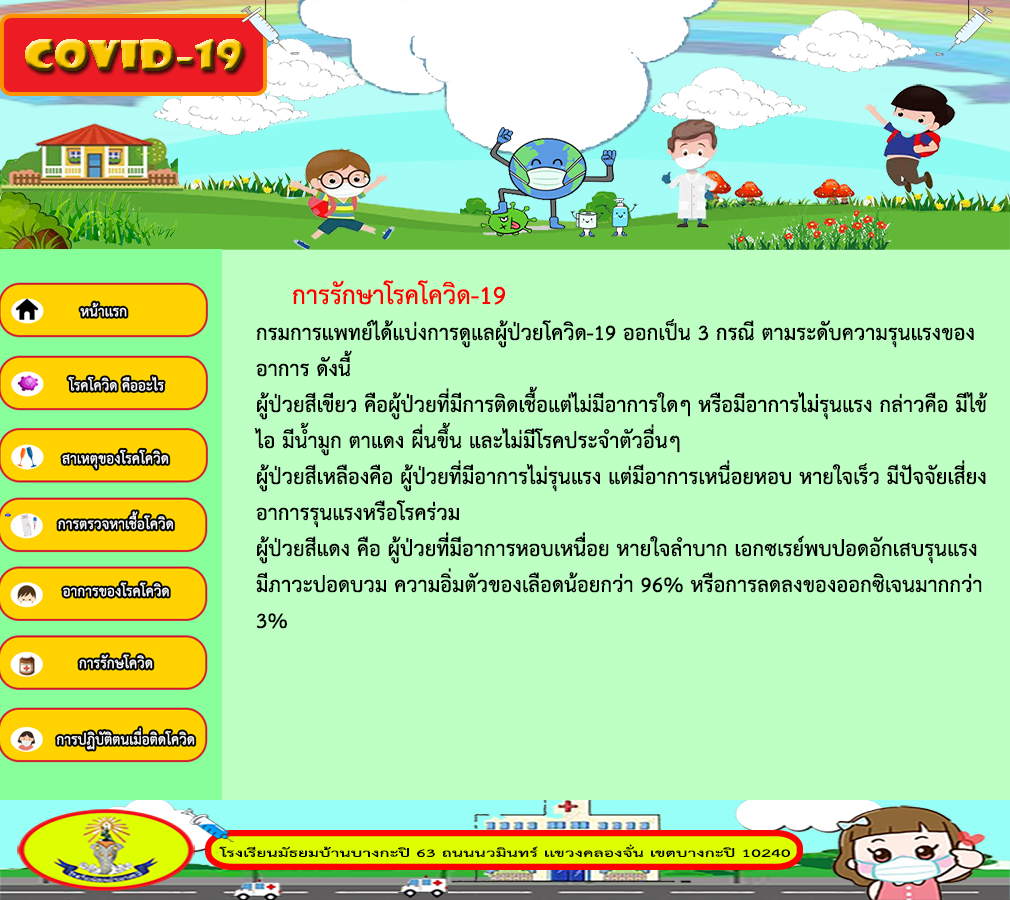
<style>
.page{position:relative;width:1010px;height:900px;background:#beffc3}
.page>*{position:absolute;margin:0}
.t1{font:30px "THSarabunPSK-Bold";color:#000000}
.t2{font:36px "THSarabunPSK-Bold";color:#000000}
.t3{font:36px "THSarabunPSK-Bold";color:#ff0000}
</style>
<div class="page">
<p class="t1" style="left:254px;top:280px;width:734px;height:349px"><span class="t2"> </span><span class="t3">การรักษาโรคโควิด-19<br></span>กรมการแพทย์ได้แบ่งการดูแลผู้ป่วยโควิด-19 ออกเป็น 3 กรณี ตามระดับความรุนแรงของ<br>อาการ ดังนี้<br>ผู้ป่วยสีเขียว คือผู้ป่วยที่มีการติดเชื้อแต่ไม่มีอาการใดๆ หรือมีอาการไม่รุนแรง กล่าวคือ มีไข้<br>ไอ มีน้ำมูก ตาแดง ผื่นขึ้น และไม่มีโรคประจำตัวอื่นๆ <br>ผู้ป่วยสีเหลืองคือ ผู้ป่วยที่มีอาการไม่รุนแรง แต่มีอาการเหนื่อยหอบ หายใจเร็ว มีปัจจัยเสี่ยง<br>อาการรุนแรงหรือโรคร่วม<br>ผู้ป่วยสีแดง คือ ผู้ป่วยที่มีอาการหอบเหนื่อย หายใจลำบาก เอกซเรย์พบปอดอักเสบรุนแรง<br>มีภาวะปอดบวม ความอิ่มตัวของเลือดน้อยกว่า 96% หรือการลดลงของออกซิเจนมากกว่า<br>3%</p>
</div>
